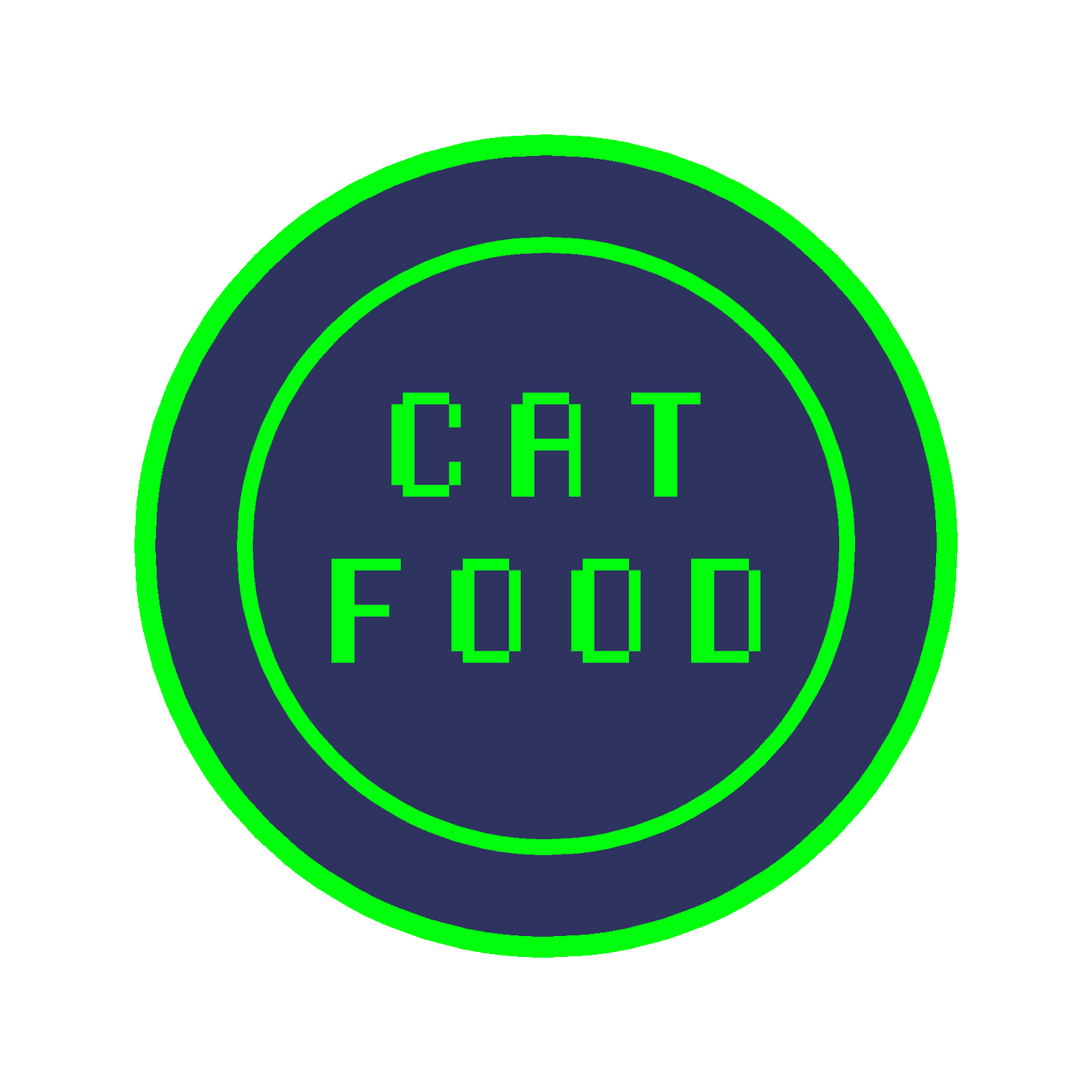
<style>
.page{position:relative;width:1092px;height:1092px;background:#ffffff}
.page>*{position:absolute;margin:0}
.t1{font:138.4px "ManaspaceReg";letter-spacing:0.2em;color:#00ff0c}
</style>
<div class="page">
<p class="t1" style="left:331px;top:392px;width:429px;height:271px;text-align:center">CAT<br>FOOD</p>
</div>
